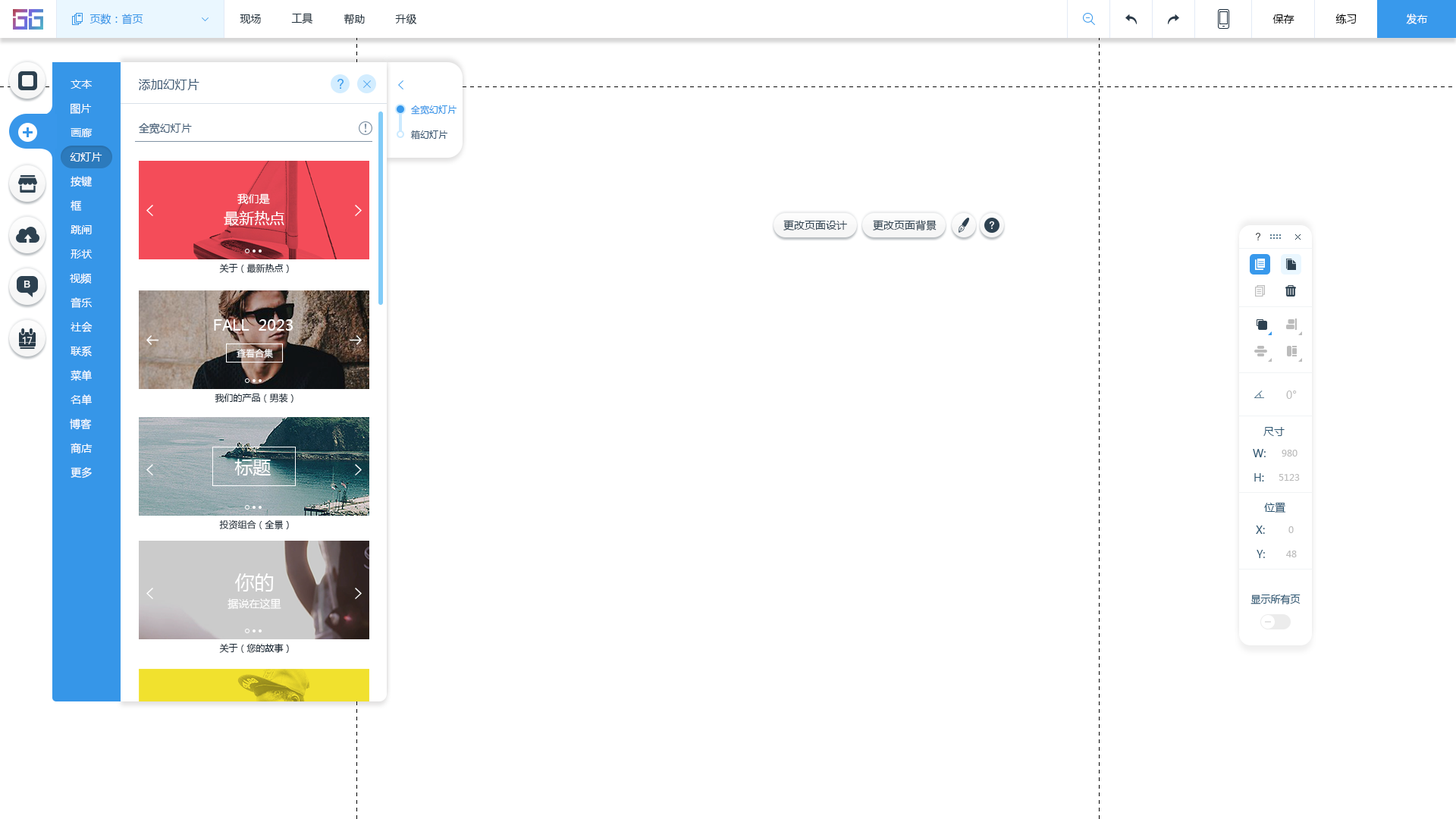
<style>
.page{position:relative;width:1456px;height:819px;background:#ffffff}
.page>*{position:absolute;margin:0}
.t1{font:10.6px "MicrosoftYaHei";color:#3696e8}
.t2{font:10.6px "MicrosoftYaHei";color:#20303c}
.t3{font:10.6px "MicrosoftYaHei";color:#000000}
.t4{font:10.6px "MicrosoftYaHei";color:#ffffff}
.t5{font:12.1px "MicrosoftYaHei";color:#395671}
.t6{font:9.1px "MicrosoftYaHei";color:#3696e8}
.t7{font:10.6px "MicrosoftYaHei";color:#395671}
.t8{font:9.1px "MicrosoftYaHei";color:#395671}
.t9{font:15.2px "MicrosoftYaHei";color:#ffffff}
.t10{font:10.6px "MicrosoftYaHei";color:#2d4150}
.t11{font:9.1px "MicrosoftYaHei";color:#1a2936}
.t12{font:15.2px "ArialMT";color:#ffffff}
.t13{font:9.1px "MicrosoftYaHei";color:#ffffff}
.t14{font:10.6px "MicrosoftYaHei";color:#bcbcbc}
.t15{font:10.6px "MicrosoftYaHei";color:#2b5672}
.t16{font:9.1px "MicrosoftYaHei";color:#bcbcbc}
.t17{font:18.2px "MicrosoftYaHei";color:#ffffff}
.t18{font:19.7px "MicrosoftYaHei";color:#ffffff}
.t19{font:9.9px "MicrosoftYaHei";color:#2b5672}
</style>
<div class="page">
<p class="t1" style="left:89px;top:14px;width:54px;height:11px">页数：首页</p>
<p class="t2" style="left:240px;top:14px;width:21px;height:10px">现场</p>
<p class="t2" style="left:291px;top:13px;width:22px;height:11px">工具</p>
<p class="t2" style="left:344px;top:14px;width:21px;height:11px">帮助</p>
<p class="t2" style="left:395px;top:14px;width:22px;height:10px">升级</p>
<p class="t3" style="left:1272px;top:14px;width:22px;height:10px">保存</p>
<p class="t3" style="left:1335px;top:14px;width:22px;height:10px">练习</p>
<p class="t4" style="left:1406px;top:14px;width:22px;height:10px">发布</p>
<p class="t4" style="left:71px;top:80px;width:21px;height:9px">文本</p>
<p class="t5" style="left:139px;top:79px;width:60px;height:11px">添加幻灯片</p>
<p class="t4" style="left:71px;top:103px;width:21px;height:12px">图片</p>
<p class="t6" style="left:411px;top:105px;width:46px;height:10px">全宽幻灯片</p>
<p class="t7" style="left:139px;top:123px;width:53px;height:11px">全宽幻灯片</p>
<p class="t4" style="left:71px;top:128px;width:22px;height:9px">画廊</p>
<p class="t8" style="left:411px;top:130px;width:36px;height:10px">箱幻灯片</p>
<p class="t4" style="left:70px;top:152px;width:32px;height:10px">幻灯片</p>
<p class="t4" style="left:71px;top:176px;width:21px;height:11px">按键</p>
<p class="t4" style="left:237px;top:193px;width:33px;height:12px">我们是</p>
<p class="t4" style="left:71px;top:200px;width:11px;height:11px">框</p>
<p class="t9" style="left:224px;top:211px;width:60px;height:15px">最新热点</p>
<p class="t10" style="left:783px;top:220px;width:64px;height:11px">更改页面设计</p>
<p class="t10" style="left:873px;top:220px;width:64px;height:11px">更改页面背景</p>
<p class="t4" style="left:71px;top:225px;width:21px;height:9px">跳闸</p>
<p class="t4" style="left:71px;top:249px;width:22px;height:10px">形状</p>
<p class="t11" style="left:219px;top:263px;width:70px;height:10px">关于（最新热点）</p>
<p class="t4" style="left:70px;top:273px;width:22px;height:11px">视频</p>
<p class="t4" style="left:71px;top:297px;width:21px;height:11px">音乐</p>
<p class="t4" style="left:71px;top:322px;width:22px;height:10px">社会</p>
<p class="t12" style="left:214px;top:319px;width:79px;height:12px">FALL<span class="t9">  2023</span></p>
<p class="t4" style="left:71px;top:346px;width:21px;height:10px">联系</p>
<p class="t13" style="left:237px;top:348px;width:36px;height:10px">查看合集</p>
<p class="t4" style="left:71px;top:370px;width:21px;height:11px">菜单</p>
<p class="t4" style="left:71px;top:394px;width:21px;height:11px">名单</p>
<p class="t11" style="left:215px;top:393px;width:78px;height:10px">我们的产品（男装）</p>
<p class="t14" style="left:1286px;top:391px;width:11px;height:8px">0°</p>
<p class="t4" style="left:70px;top:419px;width:22px;height:11px">博客</p>
<p class="t15" style="left:1263px;top:427px;width:22px;height:9px">尺寸</p>
<p class="t4" style="left:71px;top:443px;width:22px;height:10px">商店</p>
<p class="t15" style="left:1253px;top:449px;width:13px;height:8px">W:</p>
<p class="t16" style="left:1282px;top:450px;width:15px;height:7px">980</p>
<p class="t17" style="left:234px;top:459px;width:37px;height:17px">标题</p>
<p class="t4" style="left:71px;top:467px;width:21px;height:12px">更多</p>
<p class="t15" style="left:1254px;top:473px;width:10px;height:9px">H:</p>
<p class="t16" style="left:1279px;top:474px;width:21px;height:7px">5123</p>
<p class="t15" style="left:1264px;top:502px;width:22px;height:11px">位置</p>
<p class="t11" style="left:219px;top:519px;width:70px;height:10px">投资组合（全景）</p>
<p class="t15" style="left:1256px;top:526px;width:9px;height:8px">X:</p>
<p class="t16" style="left:1288px;top:526px;width:6px;height:7px">0</p>
<p class="t15" style="left:1257px;top:550px;width:8px;height:8px">Y:</p>
<p class="t16" style="left:1286px;top:551px;width:11px;height:6px">48</p>
<p class="t18" style="left:235px;top:573px;width:39px;height:18px">你的</p>
<p class="t19" style="left:1250px;top:594px;width:51px;height:10px">显示所有页</p>
<p class="t4" style="left:227px;top:598px;width:54px;height:11px">据说在这里</p>
<p class="t11" style="left:219px;top:643px;width:70px;height:10px">关于（您的故事）</p>
</div>
